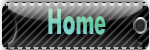
<style>
.page{position:relative;width:150px;height:50px}
.page>*{position:absolute;margin:0}
.t1{font:37.7px "Aharoni-Bold";color:#7bcfbb;scale:0.56 1}
</style>
<div class="page">
<p class="t1" style="left:48px;top:8px;width:58px;height:27px">Home</p>
</div>
